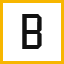
<style>
.page{position:relative;width:64px;height:64px;background:#ffffff}
.page>*{position:absolute;margin:0}
.t1{font:48px "Ö£Çì¿Æ»ÆÓÍÌåRegular";color:#111111}
</style>
<div class="page">
<p class="t1" style="left:22px;top:14px;width:20px;height:35px">B</p>
</div>
